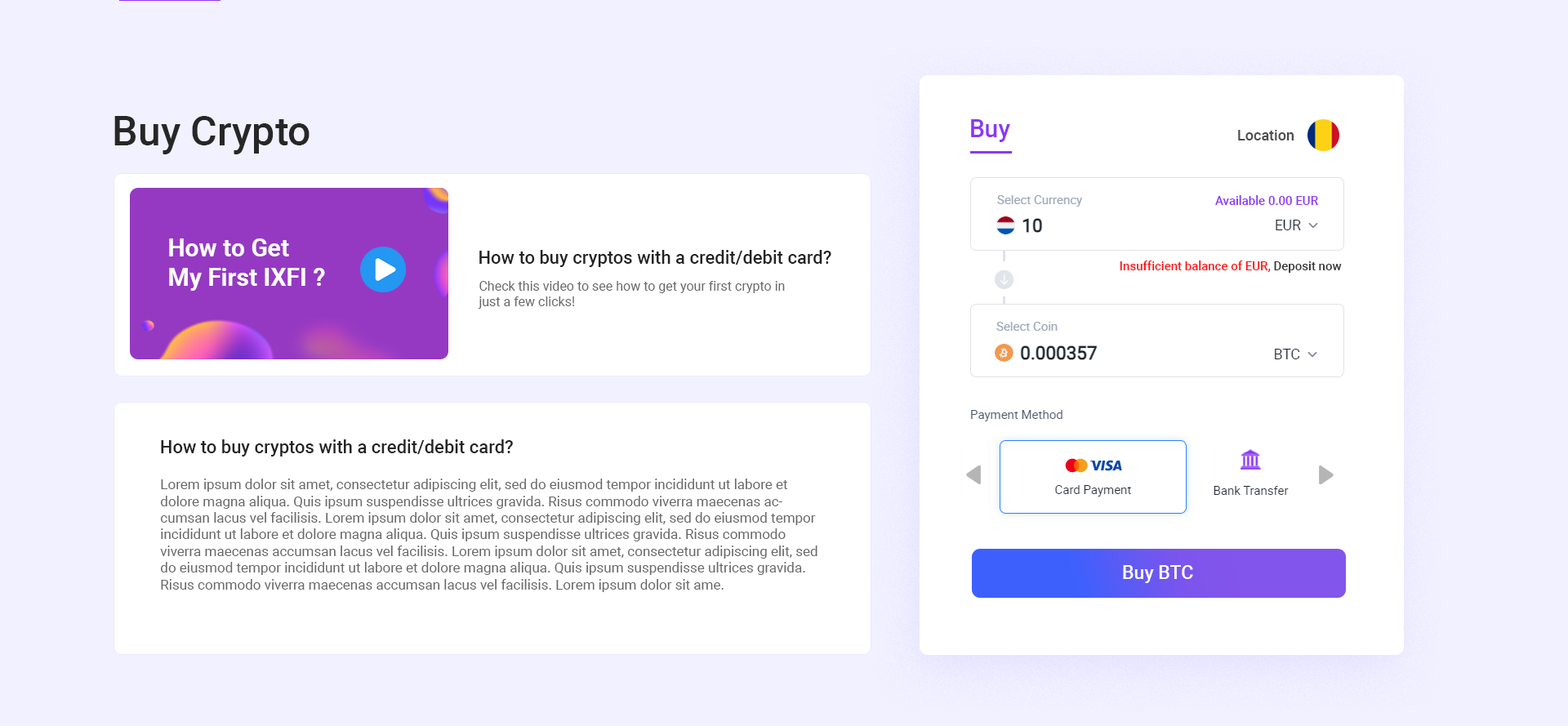
<style>
.page{position:relative;width:1568px;height:726px;background:#ffffff}
.page>*{position:absolute;margin:0}
.t1{font:40.8px "Roboto-Medium";color:#272727}
.t2{font:24.5px "Roboto-Medium";color:#8b37f7}
.t3{font:14.7px "Roboto-Medium";color:#4e4e4e}
.t4{font:12.2px "Roboto-Medium";color:#8b37f7}
.t5{font:24.5px "Roboto-Bold";color:#ffffff}
.t6{font:18px "Roboto-Medium";color:#232323}
.t7{font:12.2px "Roboto-Medium";color:#ff1212}
.t8{font:12.2px "Roboto-Medium";color:#363636}
.t9{font:13.1px "Roboto-Regular";color:#686868}
.t10{font:13.9px "Roboto-Regular";color:#686868}
.t11{font:18.8px "Roboto-Medium";color:#ffffff}
</style>
<div class="page">
<p class="t1" style="left:114px;top:116px;width:196px;height:38px">Buy Crypto</p>
<p class="t2" style="left:971px;top:119px;width:39px;height:23px">Buy</p>
<p class="t3" style="left:1238px;top:130px;width:56px;height:10px">Location</p>
<p class="t4" style="left:1215px;top:195px;width:103px;height:10px">Available 0.00 EUR</p>
<p class="t5" style="left:169px;top:238px;width:156px;height:53px">How to Get <br>My First IXFI ?</p>
<p class="t6" style="left:479px;top:250px;width:352px;height:17px">How to buy cryptos with a credit/debit card?</p>
<p class="t7" style="left:1120px;top:261px;width:222px;height:12px">Insufficient balance of EUR, <span class="t8">Deposit now</span></p>
<p class="t9" style="left:478px;top:281px;width:307px;height:28px">Check this video to see how to get your first crypto in just a few clicks!</p>
<p class="t6" style="left:161px;top:439px;width:352px;height:18px">How to buy cryptos with a credit/debit card?</p>
<p class="t10" style="left:160px;top:479px;width:657px;height:113px">Lorem ipsum dolor sit amet, consectetur adipiscing elit, sed do eiusmod tempor incididunt ut labore et dolore magna aliqua. Quis ipsum suspendisse ultrices gravida. Risus commodo viverra maecenas accumsan lacus vel facilisis. Lorem ipsum dolor sit amet, consectetur adipiscing elit, sed do eiusmod tempor incididunt ut labore et dolore magna aliqua. Quis ipsum suspendisse ultrices gravida. Risus commodo viverra maecenas accumsan lacus vel facilisis. Lorem ipsum dolor sit amet, consectetur adipiscing elit, sed do eiusmod tempor incididunt ut labore et dolore magna aliqua. Quis ipsum suspendisse ultrices gravida. Risus commodo viverra maecenas accumsan lacus vel facilisis. Lorem ipsum dolor sit ame.</p>
<p class="t11" style="left:1123px;top:565px;width:70px;height:18px">Buy BTC</p>
</div>
